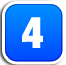
<style>
.page{position:relative;width:66px;height:65px;background:#ffffff}
.page>*{position:absolute;margin:0}
.t1{font:42px "AcmoDisplaySSiNormal";color:#ffffff}
</style>
<div class="page">
<p class="t1" style="left:22px;top:17px;width:21px;height:31px">4</p>
</div>
